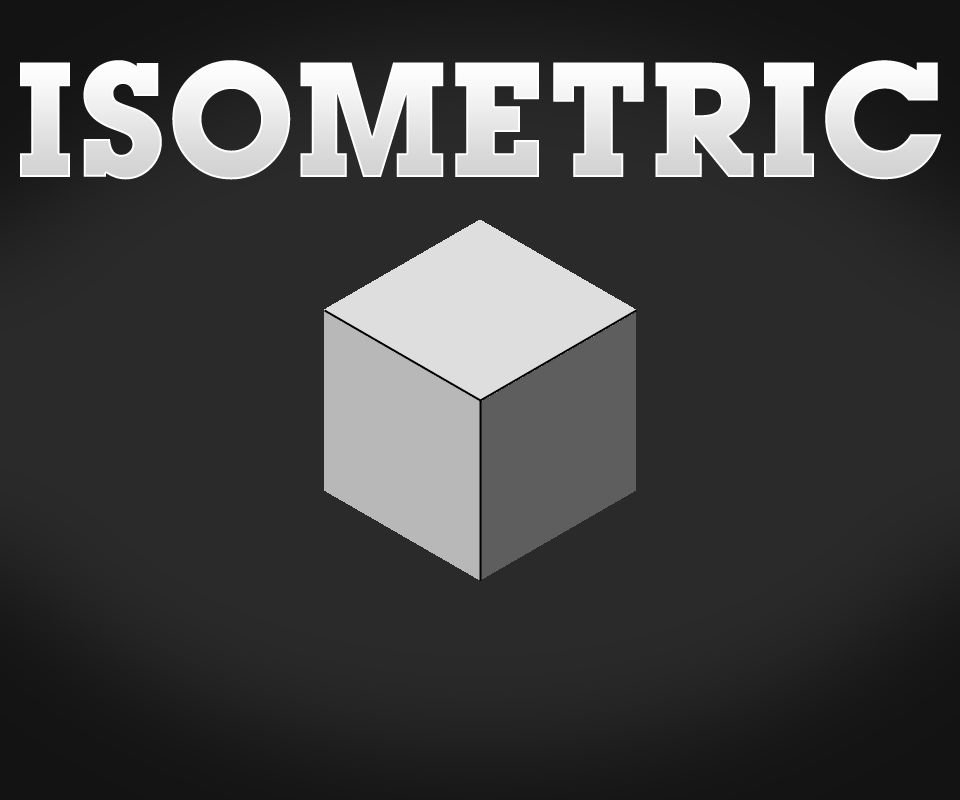
<style>
.page{position:relative;width:960px;height:800px;background:#2a2a2a}
.page>*{position:absolute;margin:0}
.t1{font:161px "ITCLubalinGraph-Bold";color:#ffffff}
</style>
<div class="page">
<p class="t1" style="left:20px;top:60px;width:922px;height:120px">ISOMETRIC</p>
</div>
